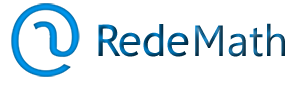
<style>
.page{position:relative;width:300px;height:87px;background:#ffffff}
.page>*{position:absolute;margin:0}
.t1{font:43.5px "TrebuchetMS"}
.t2{font:43.5px "Leelawadee"}
</style>
<div class="page">
<p class="t1" style="left:98px;top:24px;width:91px;height:33px">Rede</p>
<p class="t2" style="left:195px;top:23px;width:90px;height:34px">Math</p>
</div>
